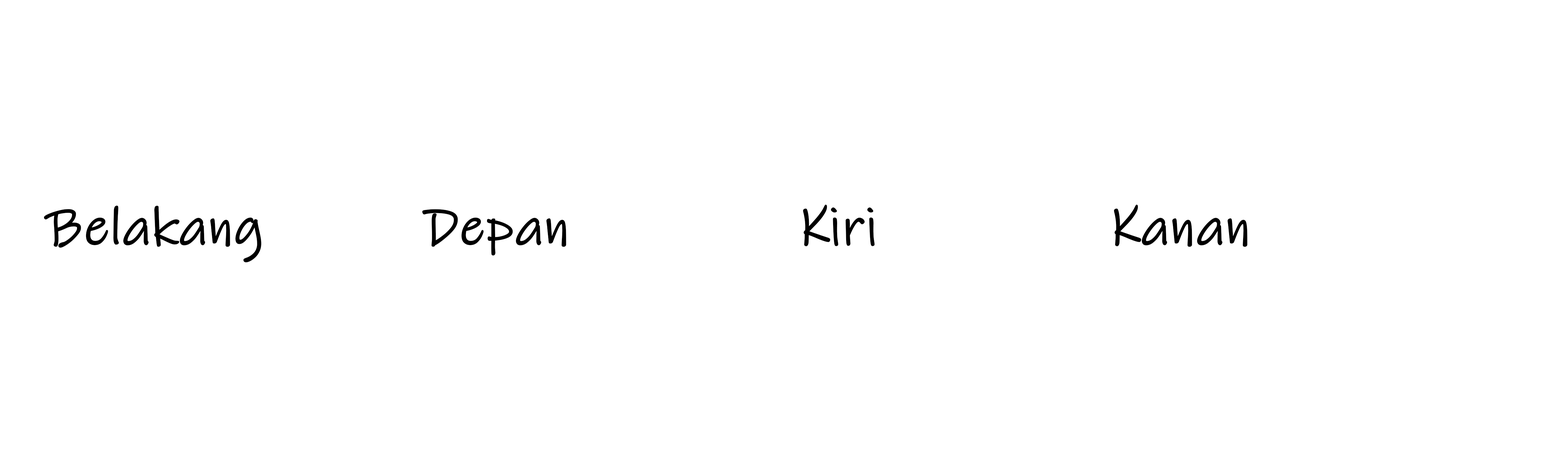
<style>
.page{position:relative;width:1568px;height:466px;background:#ffffff}
.page>*{position:absolute;margin:0}
.t1{font:53.1px "InkFree";color:#000000;font-weight:bold}
</style>
<div class="page">
<p class="t1" style="left:44px;top:205px;width:218px;height:57px">Belakang</p>
<p class="t1" style="left:422px;top:209px;width:144px;height:47px">Depan</p>
<p class="t1" style="left:803px;top:204px;width:72px;height:42px">Kiri</p>
<p class="t1" style="left:1114px;top:204px;width:133px;height:43px">Kanan</p>
</div>
